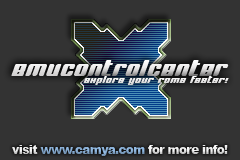
<style>
.page{position:relative;width:240px;height:160px;background:#333333}
.page>*{position:absolute;margin:0}
.t1{font:22px "BNJinx";letter-spacing:0.05em}
.t2{font:10px "BNJinx";letter-spacing:0.05em;color:#eae9e9}
.t3{font:12px "Arial-Black";letter-spacing:-0.05em}
</style>
<div class="page">
<p class="t1" style="left:11px;top:60px;width:218px;height:16px">emucontrolcenter</p>
<p class="t2" style="left:83px;top:76px;width:146px;height:9px">explore your roms faster!</p>
<p class="t3" style="left:12px;top:145px;width:216px;height:11px">visit www.camya.com for more info!</p>
</div>
